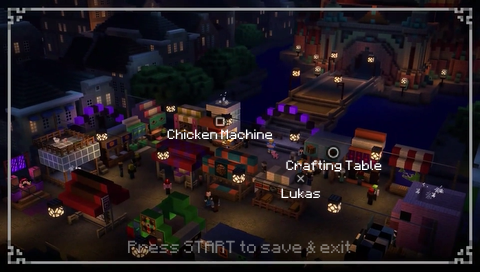
<style>
.page{position:relative;width:480px;height:272px}
.page>*{position:absolute;margin:0}
.t1{font:11px "Minecraft";color:#ffffff}
.t2{font:14px "Minecraft";color:#726f6e}
</style>
<div class="page">
<p class="t1" style="left:167px;top:129px;width:106px;height:10px">Chicken Machine</p>
<p class="t1" style="left:286px;top:160px;width:96px;height:12px">Crafting Table</p>
<p class="t1" style="left:281px;top:188px;width:40px;height:10px">Lukas</p>
<p class="t2" style="left:128px;top:240px;width:223px;height:13px">Press START to save &amp; exit</p>
</div>
